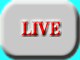
<style>
.page{position:relative;width:80px;height:60px;background:#c8c8c8}
.page>*{position:absolute;margin:0}
.t1{font:18px "MyungjoXB-HM"}
</style>
<div class="page">
<p class="t1" style="left:21px;top:21px;width:39px;height:14px">LIVE</p>
</div>
